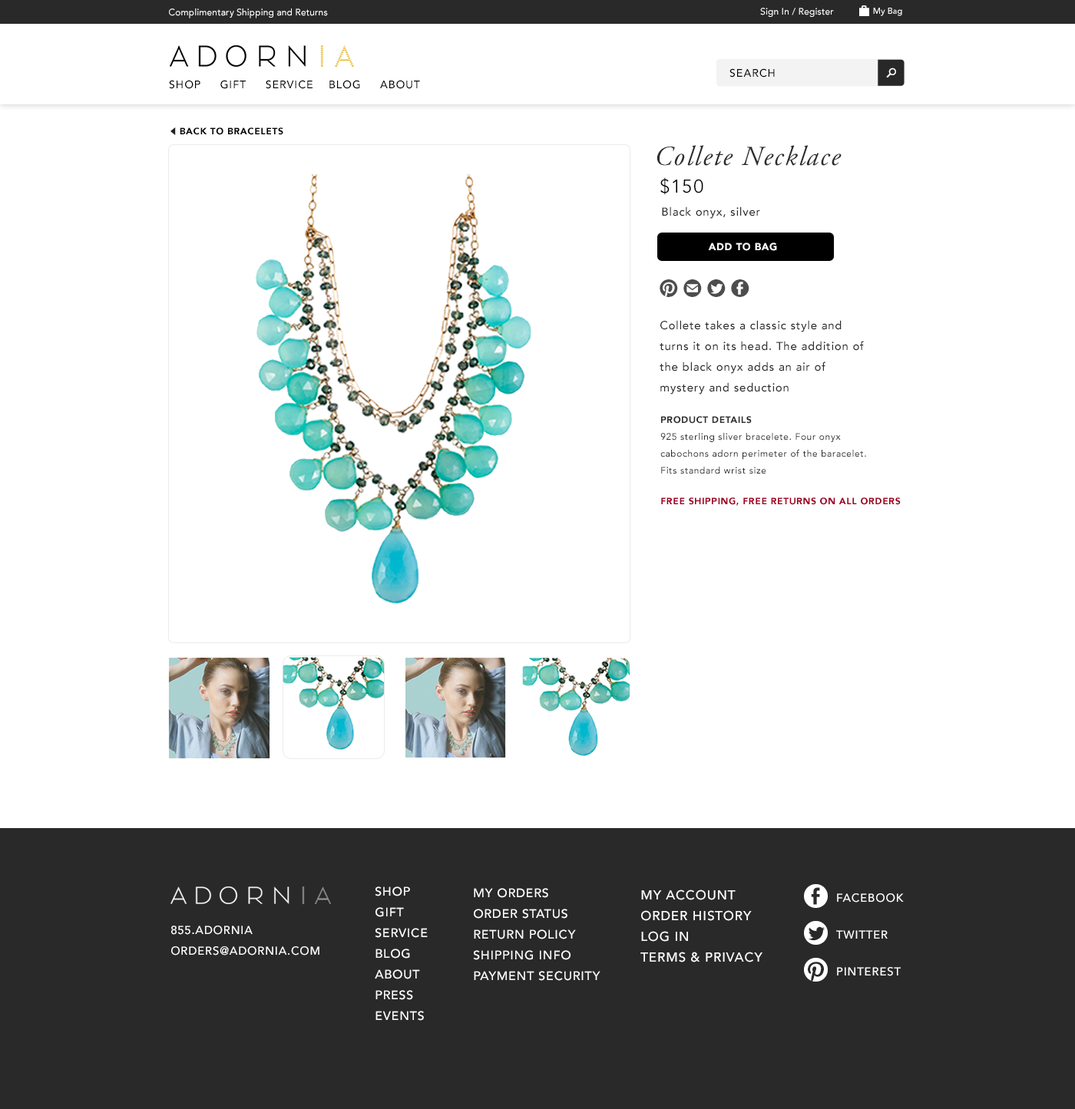
<style>
.page{position:relative;width:1075px;height:1109px;background:#ffffff}
.page>*{position:absolute;margin:0}
.t1{font:9.2px "Avenir-Medium";letter-spacing:0.01em;color:#ffffff}
.t2{font:9.2px "SSStandard";color:#000000}
.t3{font:8.4px "Avenir-Medium";letter-spacing:0.01em;color:#ffffff}
.t4{font:10.7px "Avenir-Medium";letter-spacing:0.07em;color:#000000;text-transform:uppercase}
.t5{font:9.4px "SSStandard";letter-spacing:0.05em;color:#ffffff}
.t6{font:9.2px "Avenir-Black";letter-spacing:0.05em;color:#000000}
.t7{font:7.7px "SSStandard";color:#231f20}
.t8{font:27.6px "AGaramondPro-Italic";letter-spacing:0.05em;color:#2e2d2b}
.t9{font:18.4px "Avenir-Book";letter-spacing:0.05em;color:#000000;text-transform:uppercase}
.t10{font:11.5px "Avenir-Medium";letter-spacing:0.05em;color:#2e2d2b}
.t11{font:10px "Avenir-Black";letter-spacing:0.05em;color:#ffffff}
.t12{font:17.7px "SSSocialCircle";letter-spacing:0.05em;color:#4e4d4d}
.t13{font:11.5px/20.7px "Avenir-Medium";letter-spacing:0.05em;color:#2e2d2b}
.t14{font:9.2px/16.9px "Avenir-Medium";letter-spacing:0.05em;color:#2e2d2b}
.t15{font:9.2px/20.7px "Avenir-Black";letter-spacing:0.05em;color:#2e2d2b}
.t16{font:9.2px "Avenir-Black";letter-spacing:0.05em;color:#9d0025}
.t17{font:12.3px/20.7px "Avenir-Medium";letter-spacing:0.05em;color:#ffffff}
.t18{font:12.3px/20.7px "Avenir-Medium";letter-spacing:0.05em;color:#ffffff;text-transform:uppercase}
.t19{font:13.1px/20.7px "Avenir-Medium";letter-spacing:0.05em;color:#ffffff;text-transform:uppercase}
.t20{font:23.8px/36.9px "SSSocialCircle";letter-spacing:0.05em;color:#ffffff;text-transform:uppercase}
.t21{font:11.5px/36.9px "Avenir-Medium";letter-spacing:0.05em;color:#ffffff;text-transform:uppercase}
.t22{font:11.5px/20.7px "Avenir-Medium";letter-spacing:0.05em;color:#ffffff;text-transform:uppercase}
</style>
<div class="page">
<p class="t1" style="left:169px;top:8px;width:159px;height:10px">Complimentary Shipping and Returns</p>
<p class="t1" style="left:760px;top:8px;width:74px;height:9px"><span class="t2"> </span>Sign In / Register</p>
<p class="t3" style="left:873px;top:8px;width:29px;height:8px">My Bag</p>
<p class="t4" style="left:729px;top:68px;width:46px;height:10px">Search</p>
<p class="t5" style="left:886px;top:68px;width:10px;height:10px">Search</p>
<p class="t4" style="left:169px;top:80px;width:251px;height:9px">Shop     Gift     Service    Blog     About</p>
<p class="t6" style="left:170px;top:127px;width:113px;height:8px"><span class="t7">◃ </span>BACK TO BRACELETS</p>
<p class="t8" style="left:656px;top:145px;width:185px;height:21px">Collete Necklace</p>
<p class="t9" style="left:660px;top:177px;width:43px;height:18px">$150</p>
<p class="t10" style="left:662px;top:207px;width:98px;height:12px">Black onyx, silver</p>
<p class="t11" style="left:708px;top:243px;width:69px;height:8px">ADD TO BAG</p>
<p class="t12" style="left:659px;top:279px;width:90px;height:18px">pinterest mail twitter facebook</p>
<p class="t13" style="left:659px;top:320px;width:205px;height:75px">Collete takes a classic style and turns it on its head. The addition of the black onyx adds an air of mystery and seduction</p>
<p class="t14" style="left:660px;top:416px;width:206px;height:58px"><span class="t15">PRODUCT DETAILS<br></span>925 sterling sliver bracelete. Four onyx cabochons adorn perimeter of the baracelet. Fits standard wrist size</p>
<p class="t16" style="left:661px;top:498px;width:240px;height:8px">FREE SHIPPING, FREE RETURNS ON ALL ORDERS</p>
<p class="t17" style="left:375px;top:887px;width:53px;height:134px">SHOP<br>GIFT<br>SERVICE<br>BLOG<br>ABOUT<br>PRESS<br>EVENTS</p>
<p class="t18" style="left:473px;top:888px;width:127px;height:93px">My Orders<br>Order Status<br>Return Policy<br>Shipping Info<br>Payment Security</p>
<p class="t19" style="left:640px;top:890px;width:122px;height:73px">My account<br>order history<br>log in<br>terms &amp; Privacy</p>
<p class="t20" style="left:804px;top:884px;width:100px;height:98px">facebook <span class="t21">Facebook<br></span>twitter <span class="t21">twitter<br></span>pinterest <span class="t21">pinterest</span></p>
<p class="t22" style="left:171px;top:926px;width:148px;height:30px">855.adornia<br>orders@adornia.com</p>
</div>
